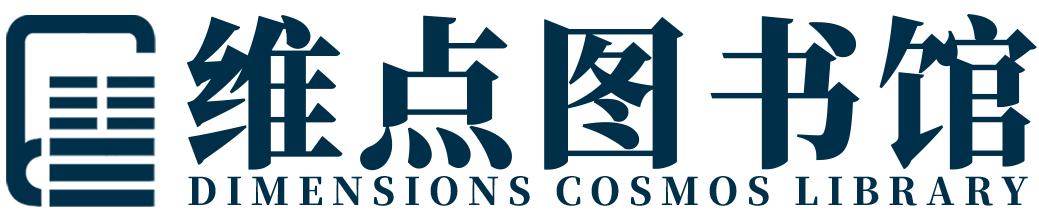
<style>
.page{position:relative;width:1039px;height:218px;background:#ffffff}
.page>*{position:absolute;margin:0}
.t1{font:161.1px "SourceHanSerifSC-Heavy";letter-spacing:0.05em;color:#003049;font-weight:bold}
.t2{font:37.8px "SourceHanSerifSC-Heavy";letter-spacing:0.23em;color:#003049}
</style>
<div class="page">
<p class="t1" style="left:186px;top:14px;width:851px;height:157px">维点图书馆</p>
<p class="t2" style="left:188px;top:176px;width:840px;height:30px">DIMENSIONS COSMOS LIBRARY</p>
</div>
